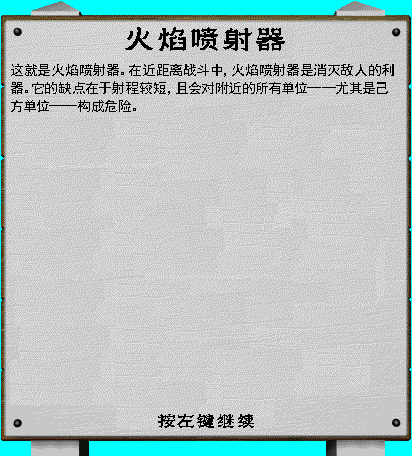
<style>
.page{position:relative;width:412px;height:456px;background:#c6c6c6}
.page>*{position:absolute;margin:0}
.t1{font:30px "???-Regular";letter-spacing:0.1em;color:#000000}
.t2{font:14px/18px "SimHei";color:#000000}
.t3{font:18px "???-Regular";letter-spacing:0.1em;color:#000000}
</style>
<div class="page">
<p class="t1" style="left:125px;top:27px;width:160px;height:24px">火焰喷射器</p>
<p class="t2" style="left:11px;top:63px;width:383px;height:49px">这就是火焰喷射器。在近距离战斗中，火焰喷射器是消灭敌人的利器。它的缺点在于射程较短，且会对附近的所有单位——尤其是己方单位——构成危险。</p>
<p class="t3" style="left:158px;top:414px;width:96px;height:14px">按左键继续</p>
</div>
